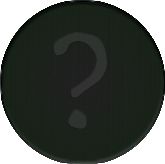
<style>
.page{position:relative;width:165px;height:164px}
.page>*{position:absolute;margin:0}
.t1{font:160px "Herculanum";letter-spacing:0.07em;color:#303330}
</style>
<div class="page">
<p class="t1" style="left:54px;top:33px;width:53px;height:96px">?</p>
</div>
